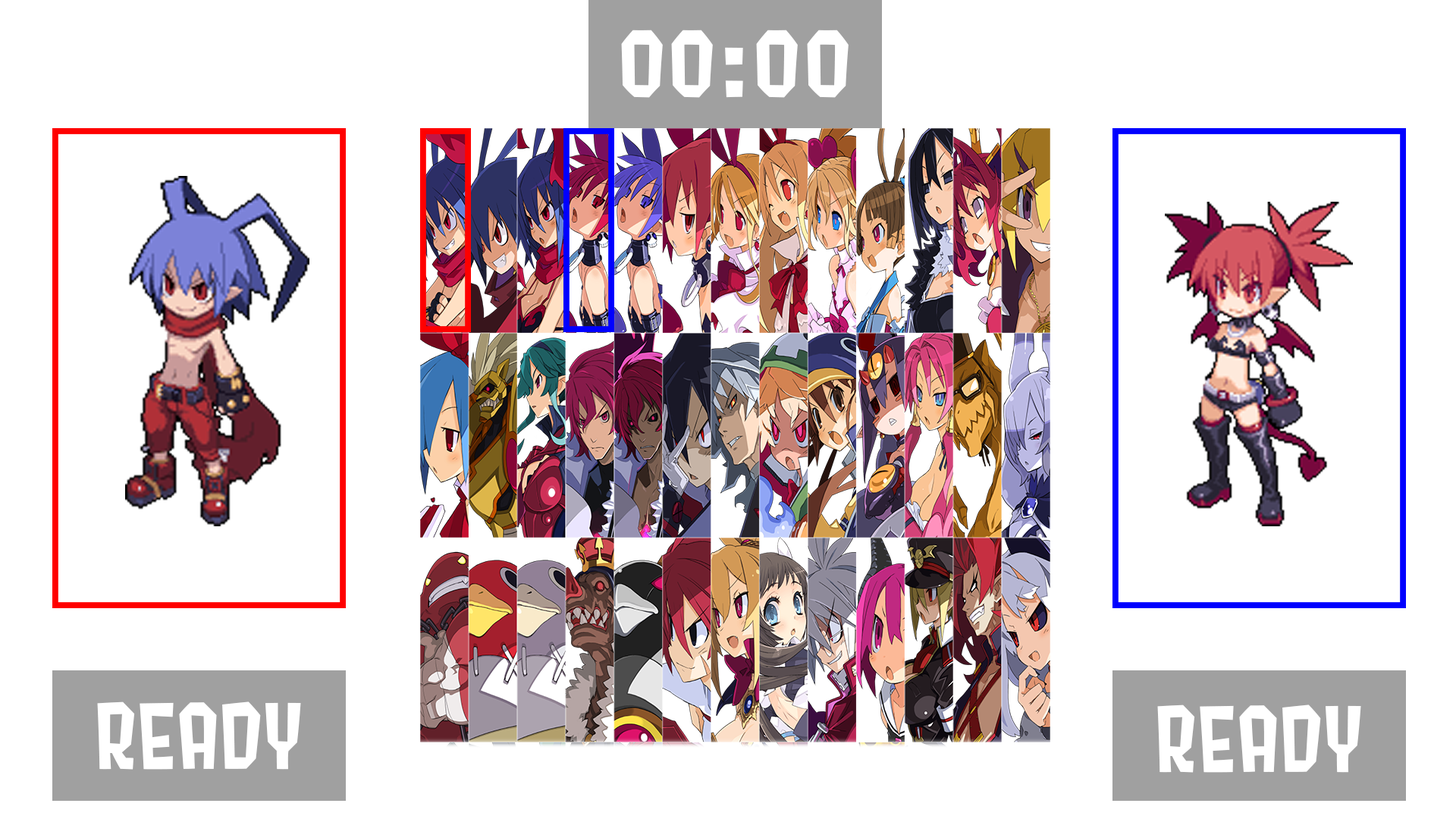
<style>
.page{position:relative;width:1456px;height:819px;background:#ffffff}
.page>*{position:absolute;margin:0}
.t1{font:91px "Splat2K";letter-spacing:0.01em;color:#ffffff}
</style>
<div class="page">
<p class="t1" style="left:621px;top:30px;width:228px;height:68px">00:00</p>
<p class="t1" style="left:97px;top:701px;width:204px;height:69px">READY</p>
<p class="t1" style="left:1157px;top:704px;width:204px;height:69px">READY</p>
</div>
